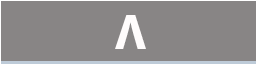
<style>
.page{position:relative;width:256px;height:64px;background:#888585}
.page>*{position:absolute;margin:0}
.t1{font:50px "MyriadPro-Bold";color:#fffcfc}
</style>
<div class="page">
<p class="t1" style="left:115px;top:15px;width:31px;height:34px;rotate:180deg">V</p>
</div>
